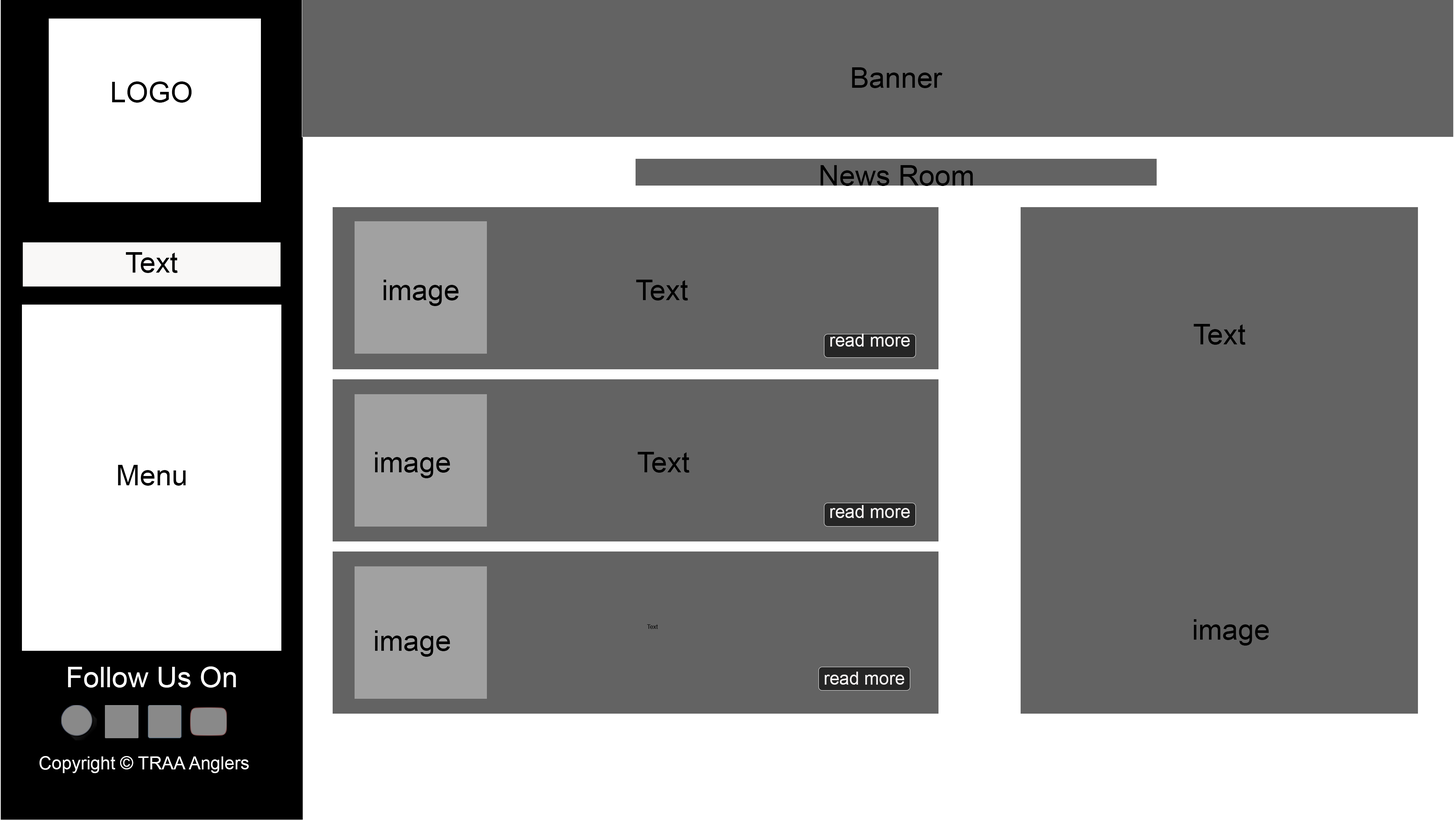
<style>
.page{position:relative;width:1454px;height:820px;background:#636363}
.page>*{position:absolute;margin:0}
.t1{font:28.7px "ArialMT";color:#000000}
.t2{font:17.8px "ArialMT";color:#f9f6f6}
.t3{font:5.9px "ArialMT";color:#000000}
.t4{font:28.7px "ArialMT";color:#ffffff}
.t5{font:17.9px "ArialMT";color:#ffffff}
</style>
<div class="page">
<p class="t1" style="left:852px;top:67px;width:91px;height:21px">Banner</p>
<p class="t1" style="left:112px;top:81px;width:80px;height:22px">LOGO</p>
<p class="t1" style="left:821px;top:165px;width:152px;height:21px">News Room</p>
<p class="t1" style="left:126px;top:252px;width:52px;height:21px">Text</p>
<p class="t1" style="left:384px;top:280px;width:75px;height:26px">image</p>
<p class="t1" style="left:636px;top:280px;width:52px;height:20px">Text</p>
<p class="t1" style="left:1194px;top:324px;width:52px;height:21px">Text</p>
<p class="t2" style="left:831px;top:334px;width:79px;height:13px">read more</p>
<p class="t1" style="left:375px;top:452px;width:75px;height:26px">image</p>
<p class="t1" style="left:638px;top:452px;width:52px;height:21px">Text</p>
<p class="t1" style="left:118px;top:465px;width:68px;height:21px">Menu</p>
<p class="t2" style="left:831px;top:505px;width:79px;height:13px">read more</p>
<p class="t3" style="left:647px;top:624px;width:11px;height:5px">Text</p>
<p class="t1" style="left:1194px;top:619px;width:75px;height:26px">image</p>
<p class="t1" style="left:375px;top:630px;width:75px;height:27px">image</p>
<p class="t4" style="left:68px;top:666px;width:168px;height:21px">Follow Us On</p>
<p class="t2" style="left:825px;top:671px;width:80px;height:13px">read more</p>
<p class="t5" style="left:39px;top:756px;width:210px;height:17px">Copyright © TRAA Anglers</p>
</div>
